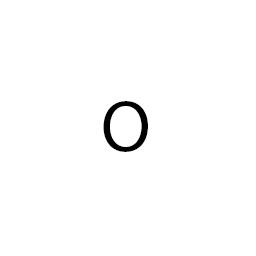
<style>
.page{position:relative;width:256px;height:256px;background:#ffffff}
.page>*{position:absolute;margin:0}
.t1{font:72px "MyriadPro-Regular";color:#000000}
</style>
<div class="page">
<p class="t1" style="left:103px;top:101px;width:45px;height:51px">O</p>
</div>
